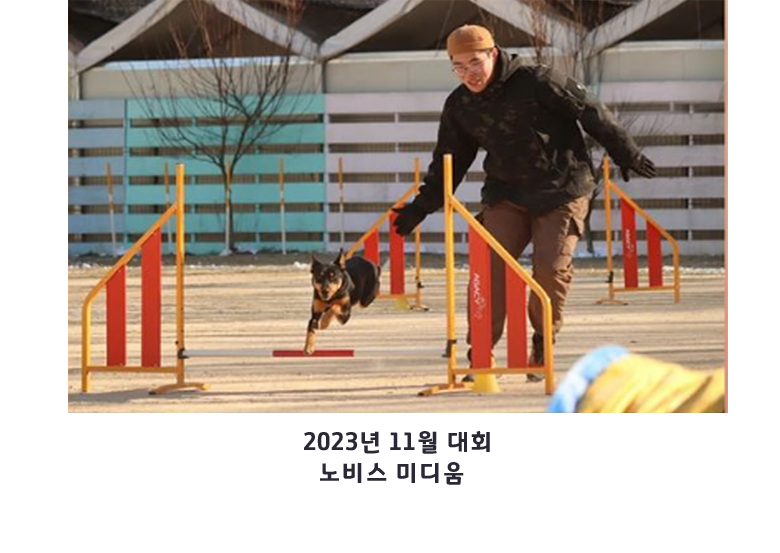
<style>
.page{position:relative;width:780px;height:553px;background:#ffffff}
.page>*{position:absolute;margin:0}
.t1{font:24.8px/31px "GyeonggiTitleV";color:#2b2836;scale:0.95 1}
</style>
<div class="page">
<p class="t1" style="left:304px;top:430px;width:186px;height:55px;text-align:center">2023년 11월 대회<br>노비스 미디움</p>
</div>
